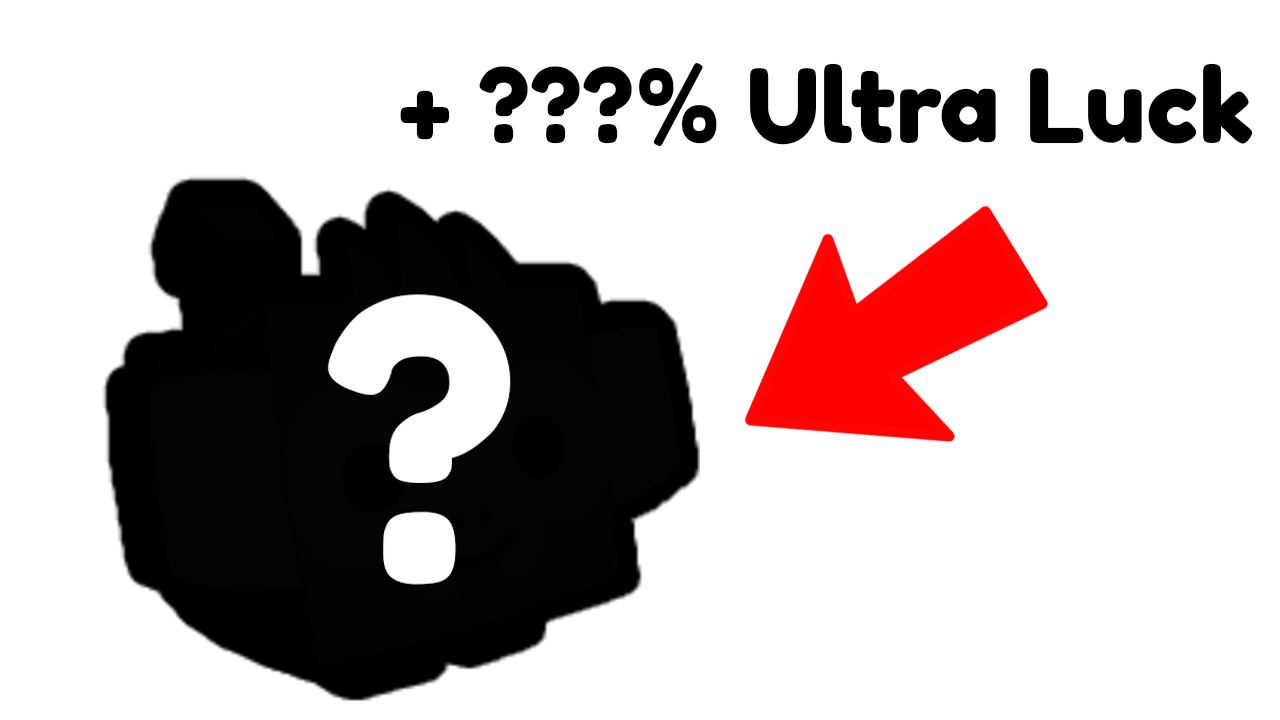
<style>
.page{position:relative;width:1280px;height:720px;background:#ffffff}
.page>*{position:absolute;margin:0}
.t1{font:102.2px "FredokaOne-Regular";color:#000000}
</style>
<div class="page">
<p class="t1" style="left:400px;top:63px;width:853px;height:84px">+ ???% Ultra Luck</p>
</div>
